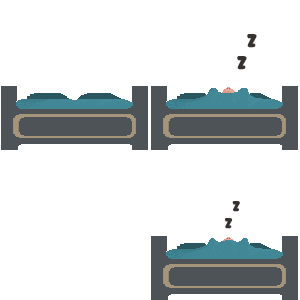
<style>
.page{position:relative;width:300px;height:300px;background:#ffffff}
.page>*{position:absolute;margin:0}
.t1{font:19.1px "SFWonderComicInline";letter-spacing:-0.01em;color:#37312f}
.t2{font:14.5px "SFWonderComicInline";letter-spacing:-0.01em;color:#37312f}
</style>
<div class="page">
<p class="t1" style="left:247px;top:34px;width:10px;height:14px">z</p>
<p class="t1" style="left:237px;top:56px;width:10px;height:14px">z</p>
<p class="t2" style="left:232px;top:201px;width:8px;height:11px">z</p>
<p class="t2" style="left:225px;top:218px;width:8px;height:11px">z</p>
</div>
